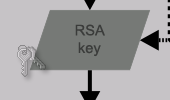
<style>
.page{position:relative;width:170px;height:100px;background:#c6c3c6}
.page>*{position:absolute;margin:0}
.t1{font:14.7px "ArialMT";color:#3b3c3b}
</style>
<div class="page">
<p class="t1" style="left:75px;top:24px;width:30px;height:33px;text-align:center">RSA<br>key</p>
</div>
